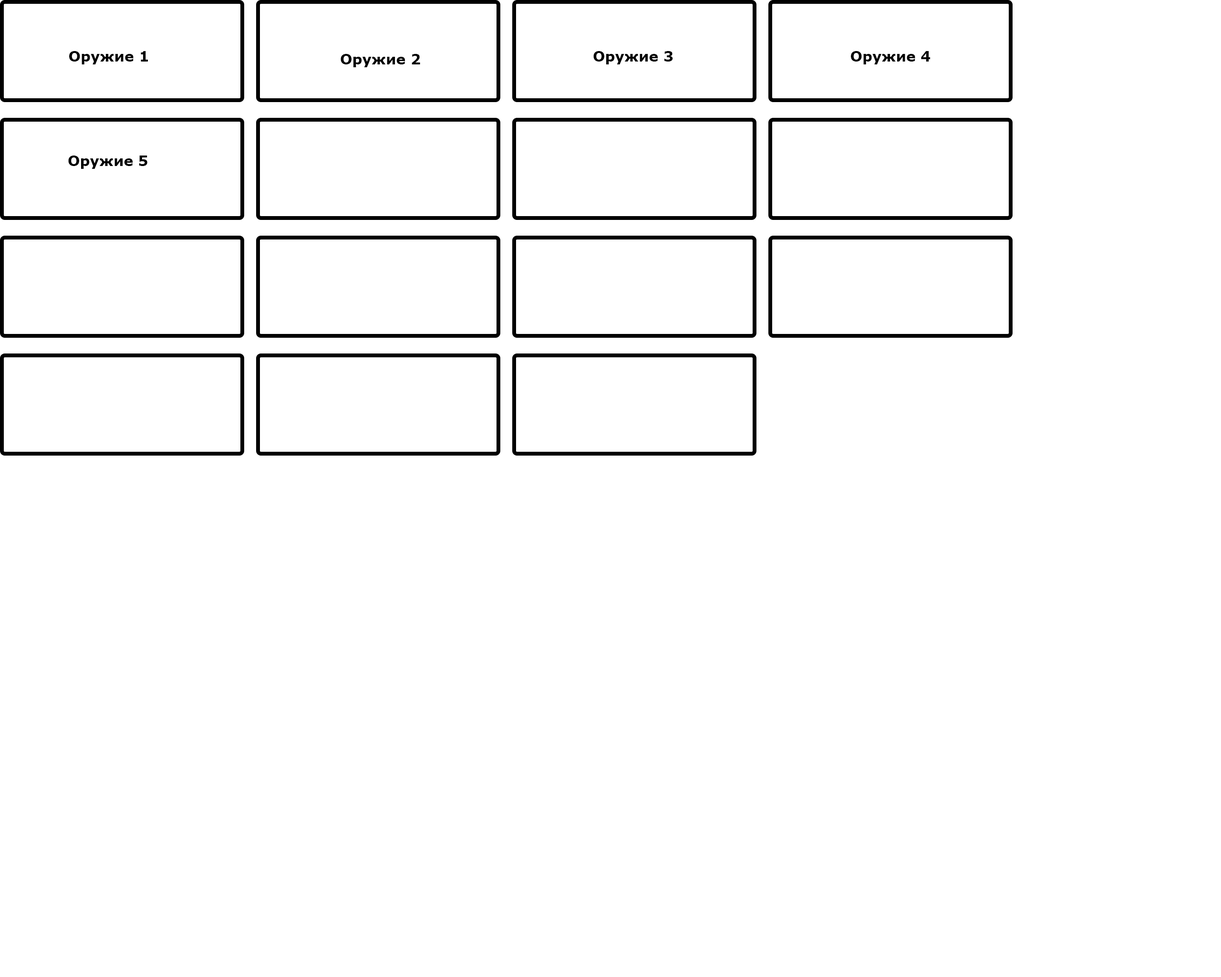
<style>
.page{position:relative;width:1221px;height:977px;background:#ffffff}
.page>*{position:absolute;margin:0}
.t1{font:14.3px "Verdana-Bold";color:#020202}
</style>
<div class="page">
<p class="t1" style="left:69px;top:51px;width:79px;height:13px">Оружие 1</p>
<p class="t1" style="left:341px;top:54px;width:79px;height:13px">Оружие 2</p>
<p class="t1" style="left:593px;top:51px;width:80px;height:13px">Оружие 3</p>
<p class="t1" style="left:851px;top:51px;width:79px;height:13px">Оружие 4</p>
<p class="t1" style="left:68px;top:155px;width:79px;height:14px">Оружие 5</p>
</div>
